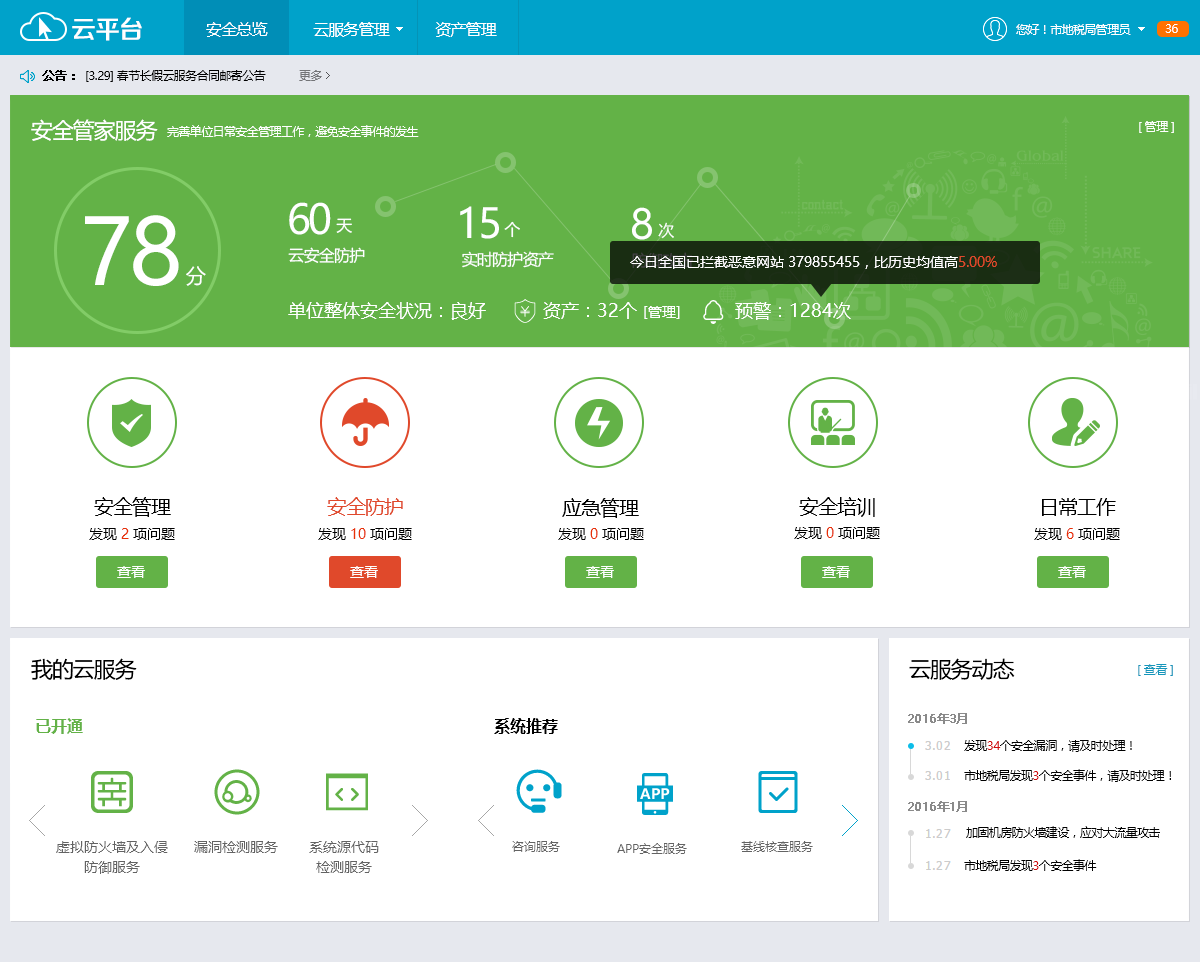
<style>
.page{position:relative;width:1200px;height:962px;background:#ffffff}
.page>*{position:absolute;margin:0}
.t1{font:25.4px "FZZZHONGJW--GB1-0";letter-spacing:-0.05em;color:#ffffff}
.t2{font:16px "MicrosoftYaHei";letter-spacing:-0.05em;color:#ffffff}
.t3{font:12px "MicrosoftYaHei";letter-spacing:-0.05em;color:#ffffff}
.t4{font:12px "MicrosoftYaHei";letter-spacing:-0.05em;color:#000000;font-weight:bold}
.t5{font:12px "MicrosoftYaHei";letter-spacing:-0.05em;color:#000000}
.t6{font:12px "MicrosoftYaHei";letter-spacing:-0.05em;color:#737477}
.t7{font:22px "MicrosoftYaHei";letter-spacing:-0.05em;color:#ffffff}
.t8{font:40.7px "MicrosoftYaHei";letter-spacing:-0.05em;color:#ffffff}
.t9{font:91.1px "MicrosoftYaHei";letter-spacing:-0.05em;color:#ffffff}
.t10{font:14px "MicrosoftYaHei";color:#ffffff}
.t11{font:14px "MicrosoftYaHei";color:#e0492b}
.t12{font:20.2px "MicrosoftYaHei";letter-spacing:-0.05em;color:#ffffff}
.t13{font:18px "MicrosoftYaHei";color:#ffffff}
.t14{font:20px "MicrosoftYaHei";letter-spacing:-0.05em;color:#000000}
.t15{font:20px "MicrosoftYaHei";letter-spacing:-0.05em;color:#e0492b}
.t16{font:14px "MicrosoftYaHei";color:#000000}
.t17{font:14px "MicrosoftYaHei";color:#e73107}
.t18{font:22px "MicrosoftYaHei";letter-spacing:-0.05em;color:#000000}
.t19{font:12px "MicrosoftYaHei";letter-spacing:-0.05em;color:#1596bb}
.t20{font:12px "MicrosoftYaHei";letter-spacing:-0.05em;color:#8a8a8a;font-weight:bold}
.t21{font:16px "MicrosoftYaHei-Bold";color:#63b247}
.t22{font:16px "MicrosoftYaHei-Bold";color:#000000}
.t23{font:12px "MicrosoftYaHei";letter-spacing:-0.05em;color:#d20d0d}
.t24{font:14px/20px "MicrosoftYaHei";color:#636363}
.t25{font:14px "MicrosoftYaHei";color:#636363}
.t26{font:12px "MicrosoftYaHei";color:#636363}
</style>
<div class="page">
<p class="t1" style="left:72px;top:17px;width:70px;height:24px">云平台</p>
<p class="t2" style="left:206px;top:22px;width:291px;height:15px">安全总览           云服务管理           资产管理</p>
<p class="t3" style="left:1016px;top:24px;width:115px;height:11px">您好！市地税局管理员</p>
<p class="t3" style="left:1165px;top:24px;width:13px;height:9px">36</p>
<p class="t4" style="left:42px;top:70px;width:33px;height:11px">公告：</p>
<p class="t5" style="left:86px;top:70px;width:180px;height:12px">[3.29] 春节长假云服务合同邮寄公告</p>
<p class="t6" style="left:299px;top:70px;width:23px;height:11px">更多</p>
<p class="t7" style="left:31px;top:119px;width:127px;height:22px">安全管家服务</p>
<p class="t3" style="left:167px;top:125px;width:252px;height:12px">完善单位日常安全管理工作，避免安全事件的发生</p>
<p class="t3" style="left:1139px;top:121px;width:35px;height:12px">[ 管理 ]</p>
<p class="t8" style="left:289px;top:202px;width:42px;height:33px">60</p>
<p class="t8" style="left:460px;top:206px;width:39px;height:33px">15</p>
<p class="t8" style="left:632px;top:207px;width:20px;height:33px">8</p>
<p class="t9" style="left:85px;top:215px;width:94px;height:71px">78</p>
<p class="t2" style="left:336px;top:218px;width:16px;height:15px">天</p>
<p class="t2" style="left:504px;top:221px;width:16px;height:17px">个</p>
<p class="t2" style="left:658px;top:222px;width:16px;height:17px">次</p>
<p class="t2" style="left:288px;top:247px;width:77px;height:17px">云安全防护</p>
<p class="t2" style="left:462px;top:251px;width:92px;height:17px">实时防护资产</p>
<p class="t10" style="left:630px;top:256px;width:367px;height:13px">今日全国已拦截恶意网站 379855455，比历史均值高<span class="t11">5.00%</span></p>
<p class="t12" style="left:186px;top:266px;width:20px;height:20px">分</p>
<p class="t13" style="left:288px;top:302px;width:198px;height:18px">单位整体安全状况：良好</p>
<p class="t13" style="left:543px;top:302px;width:94px;height:17px">资产：32个</p>
<p class="t13" style="left:735px;top:302px;width:116px;height:18px">预警：1284次</p>
<p class="t10" style="left:644px;top:306px;width:36px;height:13px">[管理]</p>
<p class="t14" style="left:94px;top:497px;width:77px;height:20px">安全管理</p>
<p class="t15" style="left:327px;top:497px;width:76px;height:19px">安全防护</p>
<p class="t14" style="left:799px;top:497px;width:76px;height:20px">安全培训</p>
<p class="t14" style="left:562px;top:498px;width:77px;height:20px">应急管理</p>
<p class="t14" style="left:1042px;top:498px;width:74px;height:18px">日常工作</p>
<p class="t16" style="left:89px;top:528px;width:86px;height:12px">发现 <span class="t17">2 </span>项问题</p>
<p class="t16" style="left:318px;top:528px;width:94px;height:12px">发现 <span class="t17">10 </span>项问题</p>
<p class="t16" style="left:558px;top:528px;width:86px;height:12px">发现 <span class="t17">0 </span>项问题</p>
<p class="t16" style="left:794px;top:527px;width:86px;height:12px">发现 <span class="t17">0 </span>项问题</p>
<p class="t16" style="left:1034px;top:528px;width:86px;height:12px">发现 <span class="t17">6 </span>项问题</p>
<p class="t10" style="left:117px;top:566px;width:28px;height:12px">查看</p>
<p class="t10" style="left:350px;top:566px;width:28px;height:12px">查看</p>
<p class="t10" style="left:586px;top:566px;width:28px;height:12px">查看</p>
<p class="t10" style="left:822px;top:566px;width:28px;height:12px">查看</p>
<p class="t10" style="left:1058px;top:566px;width:28px;height:12px">查看</p>
<p class="t18" style="left:31px;top:658px;width:106px;height:22px">我的云服务</p>
<p class="t18" style="left:909px;top:658px;width:106px;height:22px">云服务动态</p>
<p class="t19" style="left:1138px;top:664px;width:35px;height:12px">[ 查看 ]</p>
<p class="t20" style="left:908px;top:713px;width:59px;height:11px">2016年3月</p>
<p class="t21" style="left:36px;top:718px;width:47px;height:16px">已开通</p>
<p class="t22" style="left:494px;top:718px;width:64px;height:16px">系统推荐</p>
<p class="t5" style="left:964px;top:740px;width:168px;height:12px">发现<span class="t23">34</span>个安全漏洞，请及时处理！</p>
<p class="t5" style="left:964px;top:769px;width:207px;height:13px">市地税局发现<span class="t23">3</span>个安全事件，请及时处理！</p>
<p class="t20" style="left:908px;top:801px;width:59px;height:11px">2016年1月</p>
<p class="t5" style="left:966px;top:826px;width:194px;height:12px">加固机房防火墙建设，应对大流量攻击</p>
<p class="t24" style="left:56px;top:841px;width:112px;height:33px;text-align:center">虚拟防火墙及入侵<br>防御服务</p>
<p class="t25" style="left:194px;top:841px;width:84px;height:12px">漏洞检测服务</p>
<p class="t24" style="left:309px;top:841px;width:70px;height:32px;text-align:center">系统源代码<br>检测服务</p>
<p class="t26" style="left:512px;top:841px;width:48px;height:11px">咨询服务</p>
<p class="t26" style="left:617px;top:843px;width:70px;height:11px">APP安全服务</p>
<p class="t26" style="left:741px;top:841px;width:72px;height:11px">基线核查服务</p>
<p class="t5" style="left:964px;top:859px;width:133px;height:12px">市地税局发现<span class="t23">3</span>个安全事件</p>
</div>
